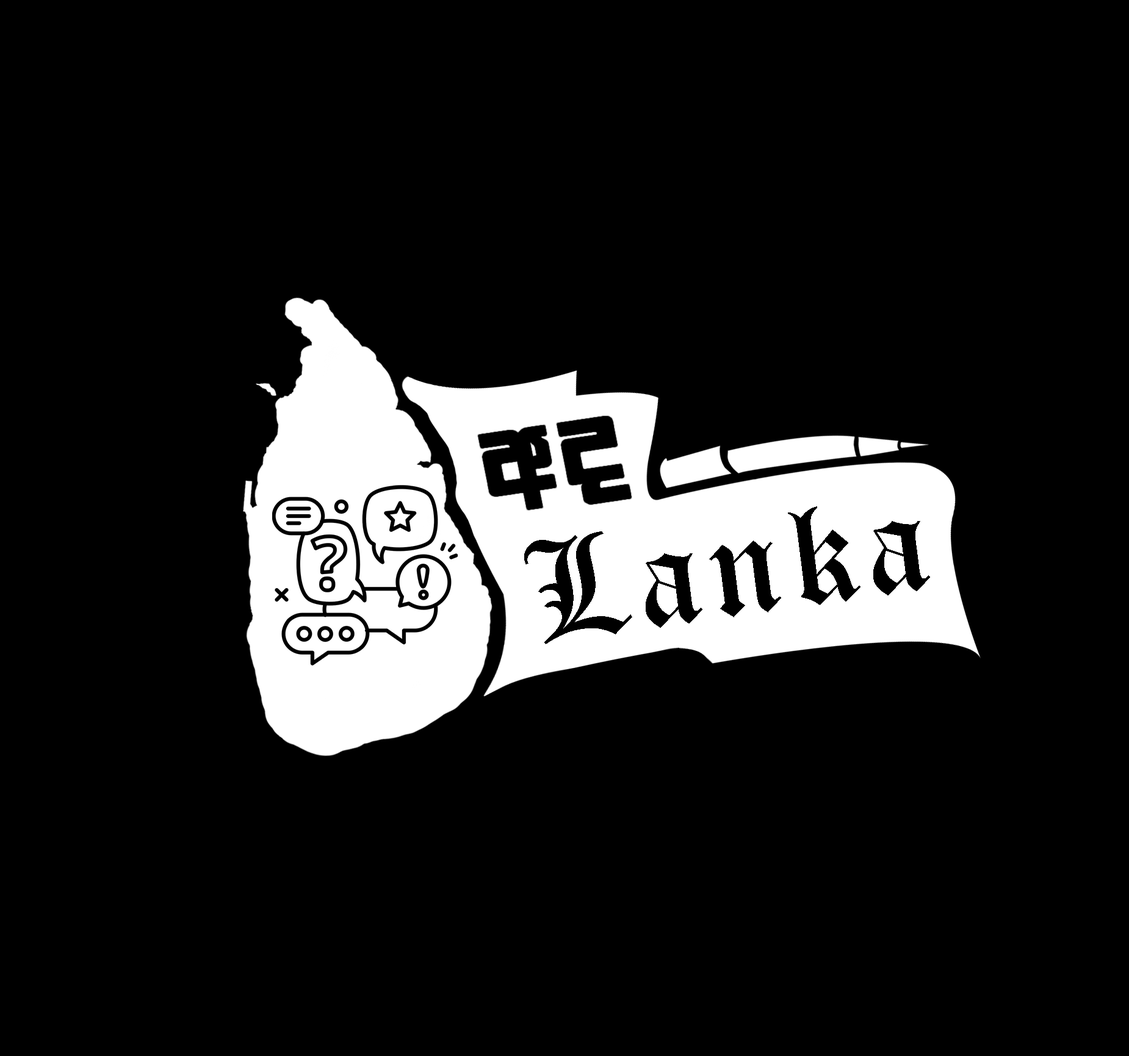
<style>
.page{position:relative;width:1129px;height:1056px;background:#000000}
.page>*{position:absolute;margin:0}
.t1{font:126.6px "FMGemunux";letter-spacing:0.05em;color:#000000;scale:1.07 1}
.t2{font:140.7px "OldEnglishTextMT";letter-spacing:0.05em;color:#000000}
</style>
<div class="page">
<p class="t1" style="left:478px;top:417px;width:153px;height:93px;rotate:-8deg">wo</p>
<p class="t2" style="left:524px;top:506px;width:406px;height:138px;rotate:-8deg">Lanka</p>
</div>
